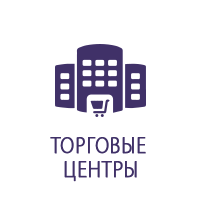
<style>
.page{position:relative;width:200px;height:200px;background:#ffffff}
.page>*{position:absolute;margin:0}
.t1{font:23.9px/38.2px "MyriadPro-Light";letter-spacing:0.025em;color:#403168;text-transform:uppercase;font-weight:bold;scale:0.83 1}
.t2{font:23.9px/24px "MyriadPro-Light";letter-spacing:0.025em;color:#403168;text-transform:uppercase;font-weight:bold;scale:0.83 1}
</style>
<div class="page">
<p class="t1" style="left:50px;top:137px;width:96px;height:45px;text-align:center">Торговые <br><span class="t2">центры</span></p>
</div>
